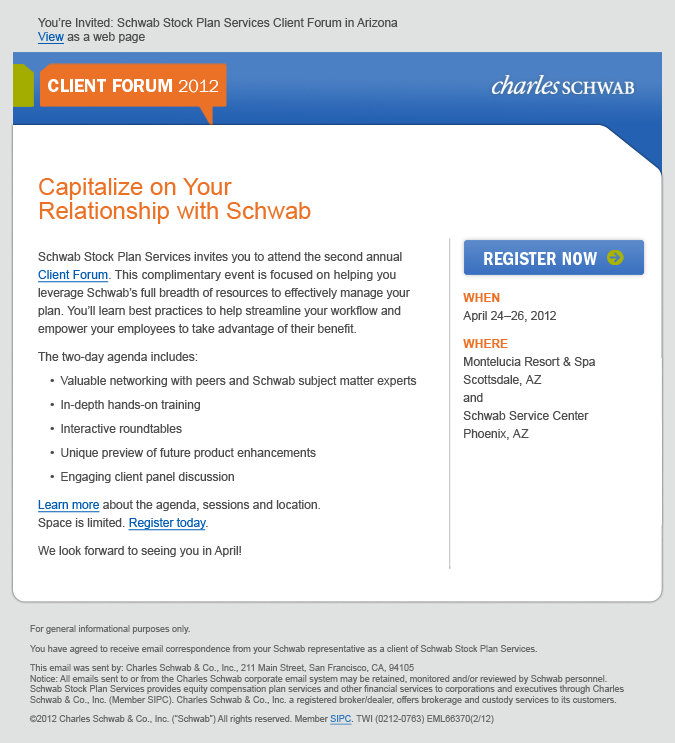
<style>
.page{position:relative;width:675px;height:743px;background:#ffffff}
.page>*{position:absolute;margin:0}
.t1{font:12px "ArialMT";color:#4d4d4d}
.t2{font:12px "ArialMT";color:#005cb3;text-decoration:underline}
.t3{font:12px/18px "ArialMT";color:#4d4d4d}
.t4{font:24px/24px "ArialMT";color:#ea7125}
.t5{font:12px/18px "ArialMT";letter-spacing:0.01em;color:#005cb3;text-decoration:underline}
.t6{font:12px/18px "ArialMT";letter-spacing:0.01em;color:#4d4d4d}
.t7{font:12px/18px "ArialMT";letter-spacing:-0.005em;color:#4d4d4d}
.t8{font:6px/14px "Wingdings-Regular";color:#4d4d4d}
.t9{font:12px/14px "ArialMT";color:#4d4d4d}
.t10{font:12px/18px "ArialMT";color:#005cb3;text-decoration:underline}
.t11{font:12px/18px "Arial-BoldMT";color:#ea7125;text-transform:uppercase}
.t12{font:9px "ArialMT";color:#6a6b6b}
.t13{font:9px "ArialMT";color:#6a6b6b;text-decoration:underline}
</style>
<div class="page">
<p class="t1" style="left:38px;top:18px;width:360px;height:26px">You’re Invited: Schwab Stock Plan Services Client Forum in Arizona<br><span class="t2">View </span>as a web page</p>
<p class="t3" style="left:38px;top:177px;width:379px;height:380px"><span class="t4">Capitalize on Your <br>Relationship with Schwab<br> <br></span>Schwab Stock Plan Services invites you to attend the second annual <span class="t5">Client Forum</span><span class="t6">. This complimentary event is focused on helping you <br></span><span class="t7">leverage Schwab’s full breadth of resources to effectively manage your </span>plan. You’ll learn best practices to help streamline your workflow and empower your employees to take advantage of their benefit.<br>The two-day agenda includes:<br><span class="t8">l </span><span class="t9">Valuable networking with peers and Schwab subject matter experts<br></span><span class="t8">l </span><span class="t9">In-depth hands-on training<br></span><span class="t8">l </span><span class="t9">Interactive roundtables<br></span><span class="t8">l </span><span class="t9">Unique preview of future product enhancements<br></span><span class="t8">l </span><span class="t9">Engaging client panel discussion<br></span><span class="t10">Learn more</span> about the agenda, sessions and location. <br>Space is limited. <span class="t10">Register today</span>. <br>We look forward to seeing you in April!</p>
<p class="t3" style="left:463px;top:293px;width:132px;height:147px"><span class="t11">When<br></span>April 24–26, 2012<br><span class="t11">Where<br></span>Montelucia Resort &amp; Spa<br>Scottsdale, AZ<br>and<br>Schwab Service Center<br>Phoenix, AZ</p>
<p class="t12" style="left:29px;top:625px;width:595px;height:100px">For general informational purposes only.<br>You have agreed to receive email correspondence from your Schwab representative as a client of Schwab Stock Plan Services.<br>This email was sent by: Charles Schwab &amp; Co., Inc., 211 Main Street, San Francisco, CA, 94105<br>Notice: All emails sent to or from the Charles Schwab corporate email system may be retained, monitored and/or reviewed by Schwab personnel. Schwab Stock Plan Services provides equity compensation plan services and other financial services to corporations and executives through Charles Schwab &amp; Co., Inc. (Member SIPC). Charles Schwab &amp; Co., Inc. a registered broker/dealer, offers brokerage and custody services to its customers. <br>©2012 Charles Schwab &amp; Co., Inc. (“Schwab”) All rights reserved. Member <span class="t13">SIPC</span>. TWI (0212-0763) EML66370(2/12)</p>
</div>
